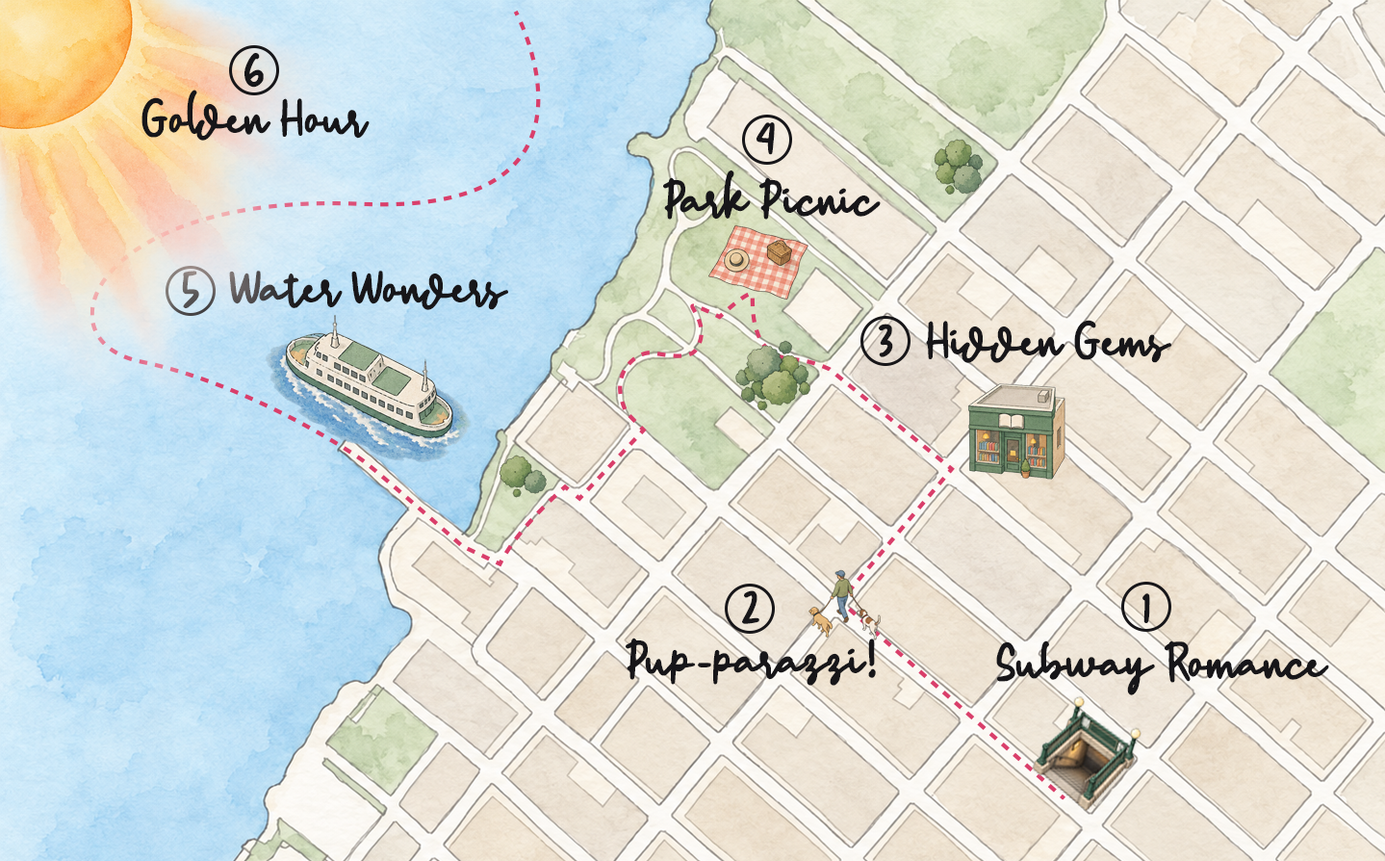
<style>
.page{position:relative;width:1385px;height:861px}
.page>*{position:absolute;margin:0}
.t1{font:57.8px "BongkyRegular";color:#171619}
.t2{font:57.8px "BongkyRegular"}
</style>
<div class="page">
<p class="t1" style="left:245px;top:53px;width:19px;height:35px">6</p>
<p class="t1" style="left:142px;top:90px;width:228px;height:51px">Golden Hour</p>
<p class="t1" style="left:757px;top:122px;width:18px;height:33px">4</p>
<p class="t1" style="left:663px;top:170px;width:218px;height:50px">Park Picnic</p>
<p class="t2" style="left:182px;top:271px;width:17px;height:37px">5</p>
<p class="t1" style="left:229px;top:271px;width:279px;height:39px">Water Wonders</p>
<p class="t1" style="left:879px;top:323px;width:14px;height:34px">3</p>
<p class="t1" style="left:926px;top:320px;width:246px;height:43px">Hidden Gems</p>
<p class="t1" style="left:742px;top:590px;width:18px;height:34px">2</p>
<p class="t1" style="left:1143px;top:593px;width:7px;height:30px">1</p>
<p class="t1" style="left:626px;top:637px;width:250px;height:48px">Pup-parazzi!</p>
<p class="t1" style="left:996px;top:640px;width:334px;height:55px">Subway Romance</p>
</div>
